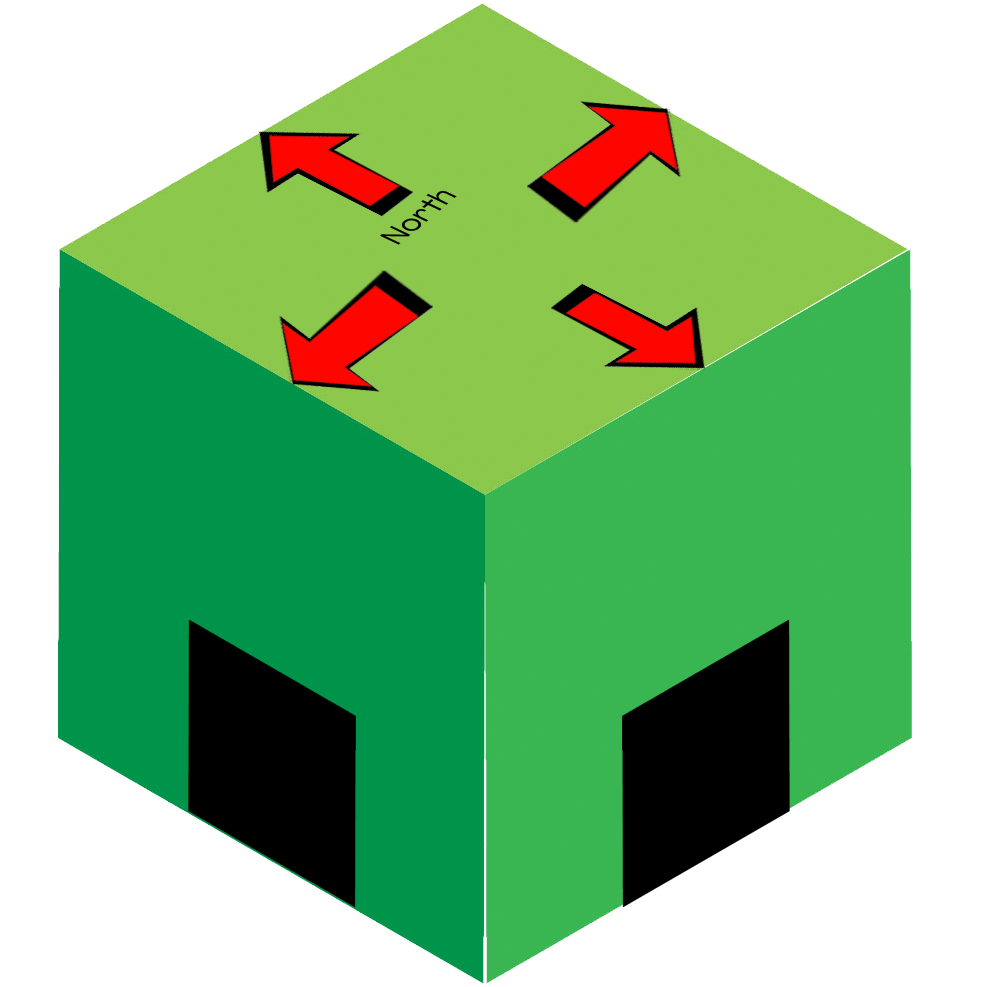
<style>
.page{position:relative;width:987px;height:987px;background:#ffffff}
.page>*{position:absolute;margin:0}
.t1{font:31.7px "JumperPERSONALUSEONLY-ThinItalic";color:#000000;scale:0.83 1}
</style>
<div class="page">
<p class="t1" style="left:380px;top:190px;width:77px;height:55px;rotate:-40deg">North</p>
</div>
